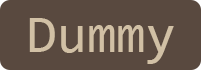
<style>
.page{position:relative;width:201px;height:70px;background:#59493f}
.page>*{position:absolute;margin:0}
.t1{font:54px "Consolas";color:#d1c0a5}
</style>
<div class="page">
<p class="t1" style="left:29px;top:18px;width:145px;height:46px">Dummy</p>
</div>
